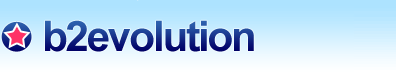
<style>
.page{position:relative;width:396px;height:84px}
.page>*{position:absolute;margin:0}
.t1{font:42px "Arial-BoldMT";letter-spacing:-0.05em}
</style>
<div class="page">
<p class="t1" style="left:45px;top:20px;width:209px;height:32px">b2evolution</p>
</div>
